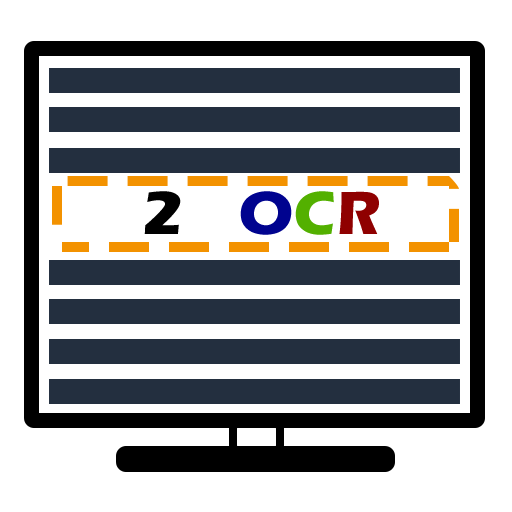
<style>
.page{position:relative;width:512px;height:512px;background:#ffffff}
.page>*{position:absolute;margin:0}
.t1{font:63px "ErasITC-Bold";letter-spacing:0.01em;color:#000000}
.t2{font:63px "ErasITC-Bold";letter-spacing:0.01em;color:#00038f}
.t3{font:63px "ErasITC-Bold";letter-spacing:0.01em;color:#53b000}
.t4{font:63px "ErasITC-Bold";letter-spacing:0.01em;color:#8f0000}
</style>
<div class="page">
<p class="t1" style="left:144px;top:191px;width:37px;height:43px">2</p>
<p class="t2" style="left:240px;top:191px;width:139px;height:44px">O<span class="t3">C</span><span class="t4">R</span></p>
</div>
